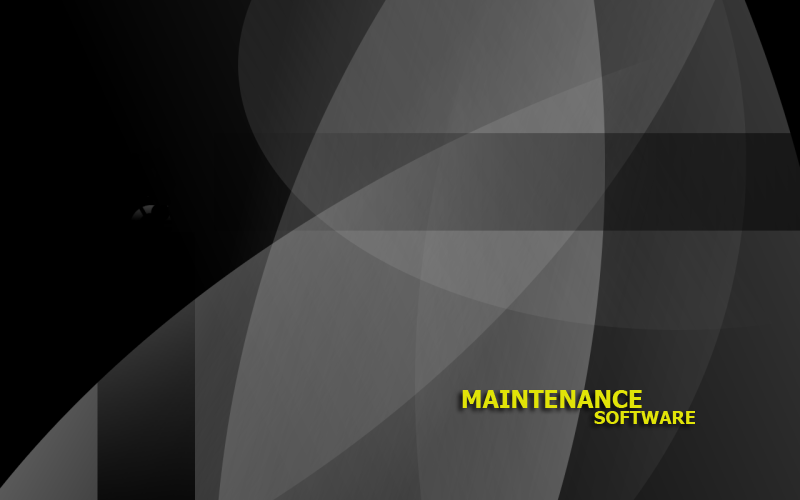
<style>
.page{position:relative;width:800px;height:500px}
.page>*{position:absolute;margin:0}
.t1{font:24px "Tahoma-Bold";color:#e1e408}
.t2{font:18px "Tahoma-Bold";color:#e1e408}
</style>
<div class="page">
<p class="t1" style="left:462px;top:390px;width:180px;height:18px">MAINTENANCE</p>
<p class="t2" style="left:594px;top:411px;width:101px;height:13px">SOFTWARE</p>
</div>
